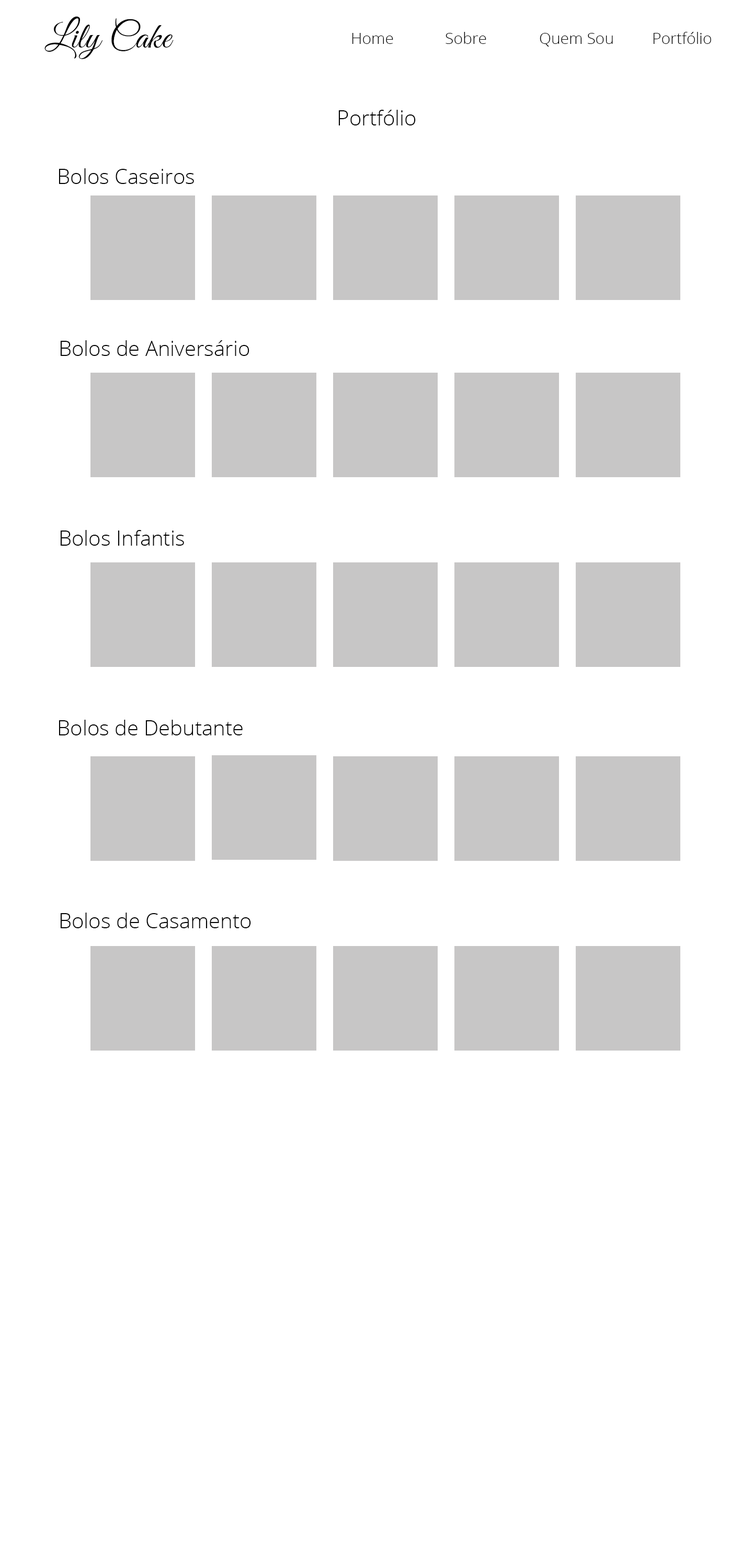
<style>
.page{position:relative;width:753px;height:1568px;background:#ffffff}
.page>*{position:absolute;margin:0}
.t1{font:36.6px "GreatVibes-Regular";color:#010101}
.t2{font:15.7px "OpenSans-Light";color:#010101}
.t3{font:20.9px "OpenSans-Light";color:#010101}
</style>
<div class="page">
<p class="t1" style="left:44px;top:16px;width:130px;height:43px">Lily Cake</p>
<p class="t2" style="left:352px;top:32px;width:359px;height:15px">Home   Sobre   Quem Sou   Portfólio</p>
<p class="t3" style="left:338px;top:110px;width:78px;height:15px">Portfólio</p>
<p class="t3" style="left:59px;top:168px;width:135px;height:16px">Bolos Caseiros</p>
<p class="t3" style="left:60px;top:340px;width:189px;height:16px">Bolos de Aniversário</p>
<p class="t3" style="left:60px;top:530px;width:124px;height:16px">Bolos Infantis</p>
<p class="t3" style="left:59px;top:720px;width:184px;height:15px">Bolos de Debutante</p>
<p class="t3" style="left:60px;top:913px;width:191px;height:15px">Bolos de Casamento</p>
</div>
